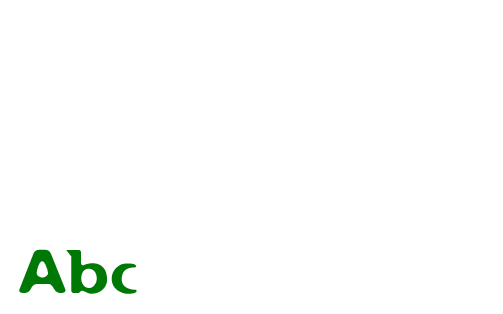
<style>
.page{position:relative;width:503px;height:314px;background:#ffffff}
.page>*{position:absolute;margin:0}
.t1{font:60px "Flexure";color:#007806}
</style>
<div class="page">
<p class="t1" style="left:19px;top:249px;width:118px;height:45px">Abc</p>
</div>
